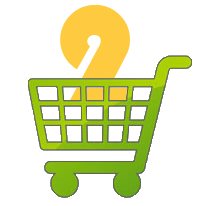
<style>
.page{position:relative;width:205px;height:206px;background:#ffffff}
.page>*{position:absolute;margin:0}
.t1{font:150px "Bauhaus93";color:#fecb40}
</style>
<div class="page">
<p class="t1" style="left:60px;top:5px;width:71px;height:102px">2</p>
</div>
